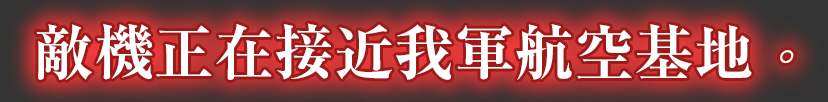
<style>
.page{position:relative;width:828px;height:102px}
.page>*{position:absolute;margin:0}
.t1{font:60px "RyuminPr6N-ExBold";color:#ffffff}
.t2{font:60px "DFKaiShu-SB-Estd-BF";color:#ffffff;font-style:italic}
</style>
<div class="page">
<p class="t1" style="left:36px;top:23px;width:758px;height:57px">敵機正在接近我軍航空基地<span class="t2">。</span></p>
</div>
